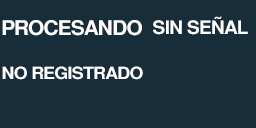
<style>
.page{position:relative;width:256px;height:128px;background:#182d3a}
.page>*{position:absolute;margin:0}
.t1{font:18.6px "NimbusSanL-Bol";letter-spacing:-0.04em;color:#ffffff;text-transform:uppercase}
.t2{font:20.2px "NimbusSanL-Bol";letter-spacing:-0.04em;color:#ffffff;text-transform:uppercase;scale:1.03 1}
.t3{font:16.9px "NimbusSanL-Bol";letter-spacing:-0.04em;color:#ffffff;text-transform:uppercase;scale:1.05 1}
</style>
<div class="page">
<p class="t1" style="left:153px;top:16px;width:95px;height:19px">sin señal</p>
<p class="t2" style="left:2px;top:20px;width:140px;height:16px">procesando</p>
<p class="t3" style="left:2px;top:66px;width:141px;height:14px">No registrado</p>
</div>
